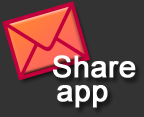
<style>
.page{position:relative;width:144px;height:117px;background:#333333}
.page>*{position:absolute;margin:0}
.t1{font:30px/24px "ArialMT";color:#ffffff;font-weight:bold}
.t2{font:30px/21px "ArialMT";color:#ffffff;font-weight:bold}
</style>
<div class="page">
<p class="t1" style="left:53px;top:55px;width:83px;height:53px;text-align:right"><span class="t2">S</span>hare<br>app</p>
</div>
